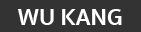
<style>
.page{position:relative;width:141px;height:32px;background:#333333}
.page>*{position:absolute;margin:0}
.t1{font:24px "SukhumvitSet-Bold";color:#ffffff}
</style>
<div class="page">
<p class="t1" style="left:17px;top:9px;width:105px;height:16px">WU KANG</p>
</div>
